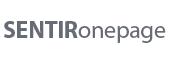
<style>
.page{position:relative;width:170px;height:60px;background:#ffffff}
.page>*{position:absolute;margin:0}
.t1{font:24px "MyriadPro-Regular";letter-spacing:-0.01em;color:#676b74}
.t2{font:24px "MyriadPro-Bold";letter-spacing:-0.01em;color:#676b74}
</style>
<div class="page">
<p class="t1" style="left:4px;top:21px;width:162px;height:22px"><span class="t2">SENTIR</span>onepage</p>
</div>
